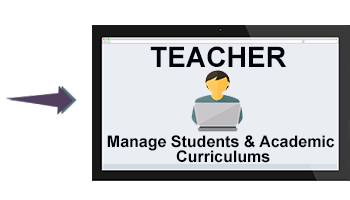
<style>
.page{position:relative;width:350px;height:200px;background:#ffffff}
.page>*{position:absolute;margin:0}
.t1{font:28.2px "Arial-BoldMT";color:#00040a}
.t2{font:16px "Arial-BoldMT";color:#00040a}
</style>
<div class="page">
<p class="t1" style="left:150px;top:46px;width:137px;height:21px">TEACHER</p>
<p class="t2" style="left:107px;top:135px;width:228px;height:16px">Manage Students &amp; Academic</p>
<p class="t2" style="left:176px;top:150px;width:94px;height:13px">Curriculums</p>
</div>
